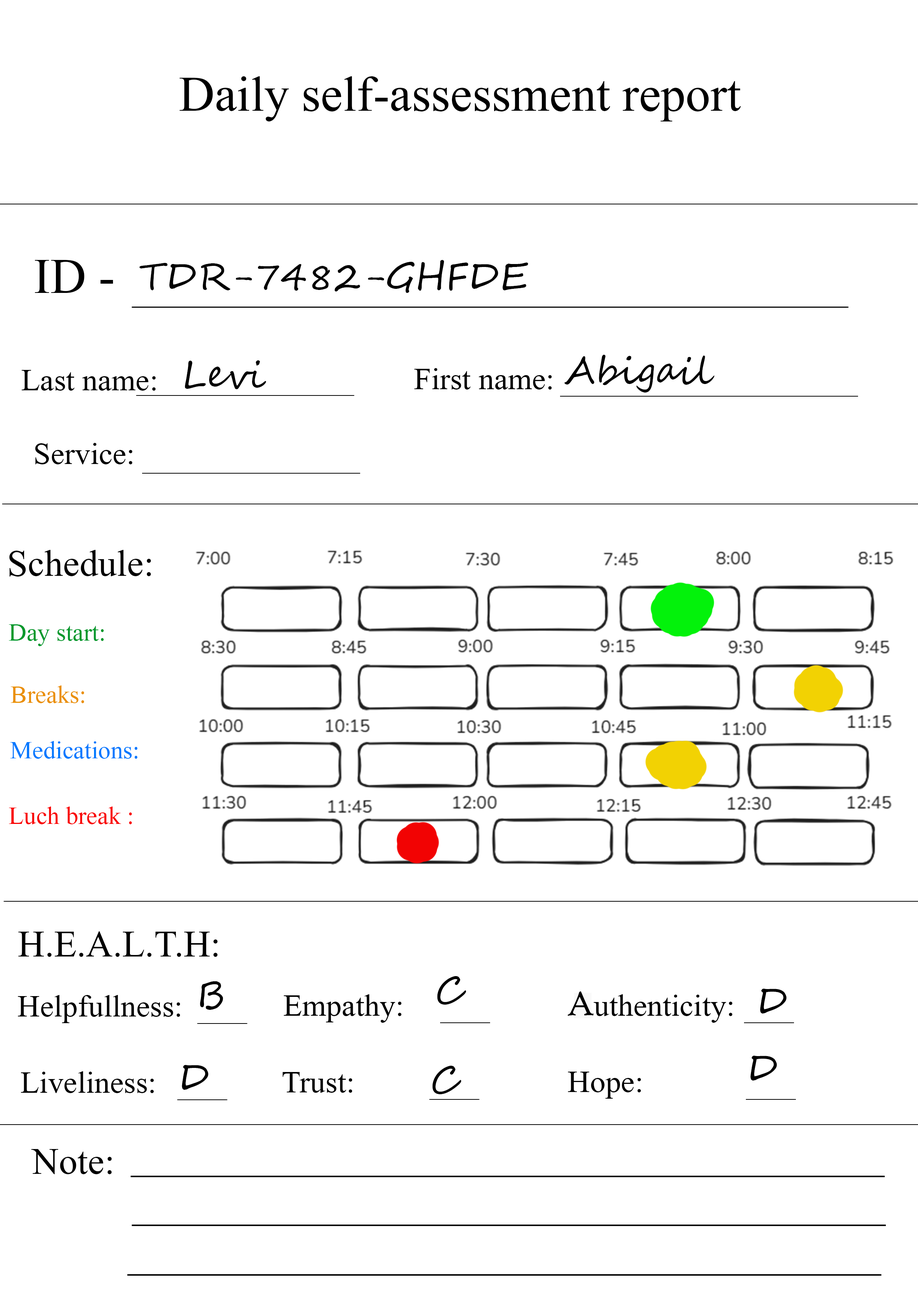
<style>
.page{position:relative;width:918px;height:1299px;background:#ffffff}
.page>*{position:absolute;margin:0}
.t1{font:74px "Microsoft-Himalaya";color:#000000}
.t2{font:37px "SegoeScript";color:#000000}
.t3{font:46.3px "Microsoft-Himalaya";color:#000000}
.t4{font:55.5px "Microsoft-Himalaya";color:#000000}
.t5{font:37px "Microsoft-Himalaya";color:#00982b}
.t6{font:37px "Microsoft-Himalaya";color:#ea8f00}
.t7{font:37px "Microsoft-Himalaya";color:#0078ff}
.t8{font:37px "Microsoft-Himalaya";color:#f90000}
.t9{font:37px "HighTowerText-Reg";color:#000000}
</style>
<div class="page">
<p class="t1" style="left:180px;top:76px;width:561px;height:45px">Daily self-assessment report</p>
<p class="t1" style="left:35px;top:260px;width:78px;height:33px">ID -</p>
<p class="t2" style="left:140px;top:260px;width:388px;height:33px">TDR-7482-GHFDE</p>
<p class="t2" style="left:185px;top:360px;width:81px;height:29px">Levi</p>
<p class="t2" style="left:565px;top:355px;width:150px;height:37px">Abigail</p>
<p class="t3" style="left:21px;top:370px;width:135px;height:21px">Last name:</p>
<p class="t3" style="left:414px;top:368px;width:138px;height:21px">First name:</p>
<p class="t3" style="left:35px;top:443px;width:98px;height:21px">Service:</p>
<p class="t4" style="left:9px;top:550px;width:142px;height:26px">Schedule:</p>
<p class="t5" style="left:9px;top:624px;width:95px;height:22px">Day start:</p>
<p class="t6" style="left:11px;top:685px;width:73px;height:18px">Breaks:</p>
<p class="t7" style="left:10px;top:741px;width:128px;height:18px">Medications:</p>
<p class="t8" style="left:9px;top:806px;width:123px;height:18px">Luch break :</p>
<p class="t4" style="left:18px;top:931px;width:200px;height:26px">H.E.A.L.T.H:</p>
<p class="t2" style="left:437px;top:976px;width:29px;height:28px">C</p>
<p class="t2" style="left:200px;top:981px;width:23px;height:29px">B</p>
<p class="t2" style="left:760px;top:988px;width:27px;height:25px">D</p>
<p class="t3" style="left:18px;top:995px;width:162px;height:28px">Helpfullness:</p>
<p class="t3" style="left:284px;top:994px;width:118px;height:29px">Empathy:</p>
<p class="t9" style="left:568px;top:991px;width:26px;height:25px">A</p>
<p class="t3" style="left:581px;top:994px;width:152px;height:29px">authenticity:</p>
<p class="t2" style="left:750px;top:1056px;width:27px;height:24px">D</p>
<p class="t3" style="left:21px;top:1071px;width:133px;height:22px">Liveliness:</p>
<p class="t2" style="left:182px;top:1065px;width:26px;height:25px">D</p>
<p class="t3" style="left:282px;top:1072px;width:70px;height:21px">Trust:</p>
<p class="t2" style="left:432px;top:1065px;width:29px;height:29px">C</p>
<p class="t3" style="left:568px;top:1071px;width:73px;height:27px">Hope:</p>
<p class="t4" style="left:31px;top:1149px;width:81px;height:25px">Note:</p>
</div>
